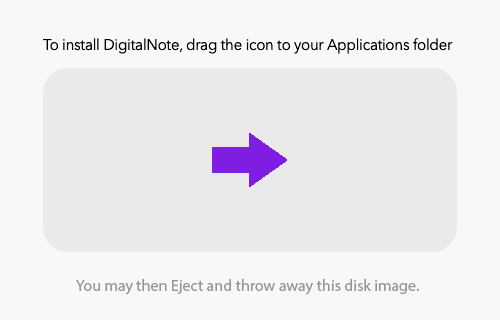
<style>
.page{position:relative;width:500px;height:320px;background:#f8f8f8}
.page>*{position:absolute;margin:0}
.t1{font:15px "AvenirNext-Regular";letter-spacing:-0.017em;color:#000000}
</style>
<div class="page">
<p class="t1" style="left:43px;top:38px;width:410px;height:16px">To install DigitalNote, drag the icon to your Applications folder</p>
</div>
